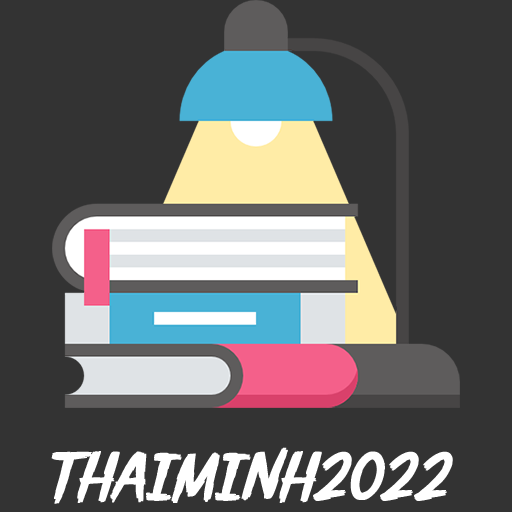
<style>
.page{position:relative;width:512px;height:512px;background:#333333}
.page>*{position:absolute;margin:0}
.t1{font:65px "SVN-DHFDexsarBrush";color:#ffffff;text-transform:uppercase;font-weight:bold}
</style>
<div class="page">
<p class="t1" style="left:51px;top:447px;width:402px;height:57px">THAIMINH2022</p>
</div>
